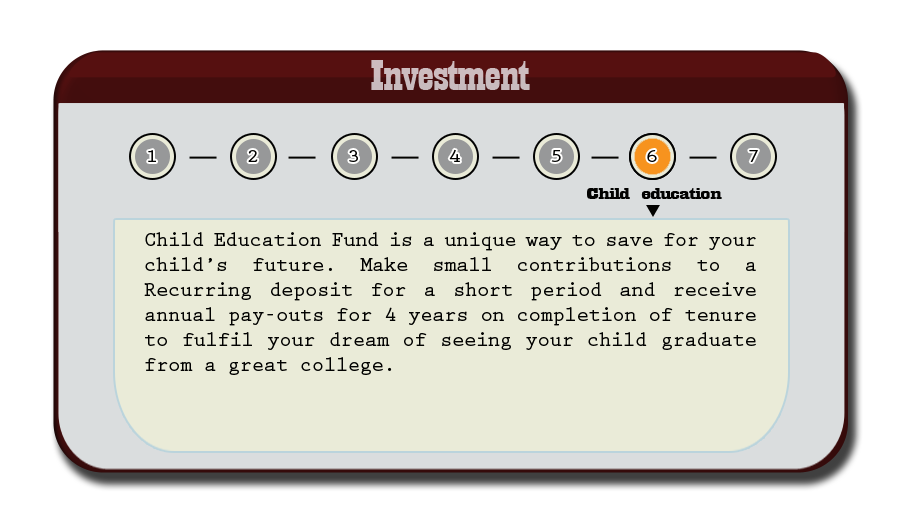
<style>
.page{position:relative;width:910px;height:512px;background:#eaebd8}
.page>*{position:absolute;margin:0}
.t1{font:44.6px "Playbill";letter-spacing:-0.025em;color:#c8bbbe;scale:1.61 1}
.t2{font:18.8px "PrestigeEliteStd-Bd";letter-spacing:-0.025em;color:#020201;scale:1.18 1}
.t3{font:17.3px "Playbill";letter-spacing:-0.025em;color:#020201;scale:2.47 1}
.t4{font:20.8px "PrestigeEliteStd-Bd";letter-spacing:-0.025em;color:#020201}
</style>
<div class="page">
<p class="t1" style="left:371px;top:60px;width:159px;height:30px">Investment</p>
<p class="t2" style="left:148px;top:150px;width:8px;height:12px">1</p>
<p class="t2" style="left:248px;top:150px;width:10px;height:12px">2</p>
<p class="t2" style="left:349px;top:150px;width:9px;height:12px">3</p>
<p class="t2" style="left:449px;top:149px;width:11px;height:13px">4</p>
<p class="t2" style="left:551px;top:150px;width:10px;height:12px">5</p>
<p class="t2" style="left:647px;top:150px;width:10px;height:12px">6</p>
<p class="t2" style="left:749px;top:150px;width:9px;height:12px">7</p>
<p class="t3" style="left:587px;top:188px;width:135px;height:11px">Child education</p>
<p class="t4" style="left:144px;top:232px;width:612px;height:143px;text-align:justify">Child Education Fund is a unique way to save for your child’s future. Make small contributions to a Recurring deposit for a short period and receive annual pay-outs for 4 years on completion of tenure to fulfil your dream of seeing your child graduate from a great college.</p>
</div>
